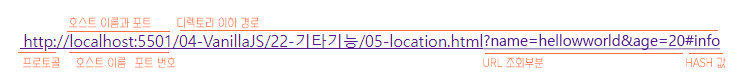
<style>
.page{position:relative;width:745px;height:83px;background:#ffffff}
.page>*{position:absolute;margin:0}
.t1{font:12px "NIXGONM-Vb";scale:0.9 1}
.t2{font:15px "MalgunGothic";color:#551a8b;text-decoration:underline}
.t3{font:12px "NIXGONM-Vb";color:#ff703d;scale:0.9 1}
</style>
<div class="page">
<p class="t1" style="left:69px;top:17px;width:82px;height:11px">호스트 이름과 포트</p>
<p class="t1" style="left:177px;top:17px;width:82px;height:12px">디렉토리 이하 경로</p>
<p class="t2" style="left:483px;top:34px;width:238px;height:16px">?name=hellowworld&amp;age=20#info</p>
<p class="t1" style="left:23px;top:57px;width:37px;height:11px">프로토콜</p>
<p class="t1" style="left:76px;top:57px;width:50px;height:11px">호스트 이름</p>
<p class="t1" style="left:135px;top:57px;width:41px;height:11px">포트 번호</p>
<p class="t3" style="left:483px;top:57px;width:60px;height:11px">URL 조회부분</p>
<p class="t1" style="left:686px;top:57px;width:40px;height:11px">HASH 값</p>
</div>
